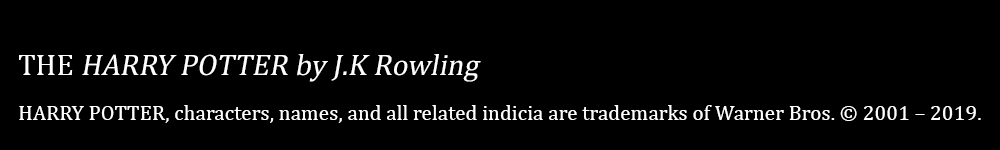
<style>
.page{position:relative;width:1000px;height:150px;background:#000000}
.page>*{position:absolute;margin:0}
.t1{font:30.1px "Cambria";color:#ffffff;font-style:italic}
.t2{font:30.1px "Cambria";color:#ffffff}
.t3{font:21.3px "Cambria";color:#ffffff}
</style>
<div class="page">
<p class="t1" style="left:19px;top:54px;width:462px;height:28px"><span class="t2">   THE </span>HARRY POTTER by J.K Rowling</p>
<p class="t3" style="left:19px;top:105px;width:962px;height:18px">HARRY POTTER, characters, names, and all related indicia are trademarks of Warner Bros. © 2001 – 2019.</p>
</div>
